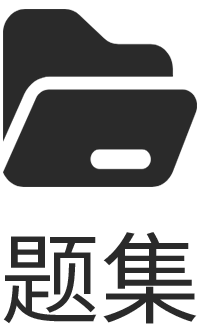
<style>
.page{position:relative;width:200px;height:330px;background:#ffffff}
.page>*{position:absolute;margin:0}
.t1{font:100px "SourceHanSansCN-Regular";letter-spacing:0.001em;color:#2a2a2a}
</style>
<div class="page">
<p class="t1" style="left:3px;top:232px;width:194px;height:92px">题集</p>
</div>
